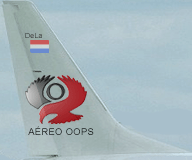
<style>
.page{position:relative;width:192px;height:160px}
.page>*{position:absolute;margin:0}
.t1{font:9.3px "ArialMT";letter-spacing:0.04em}
</style>
<div class="page">
<p class="t1" style="left:28px;top:126px;width:66px;height:9px">AÉREO OOPS</p>
</div>
